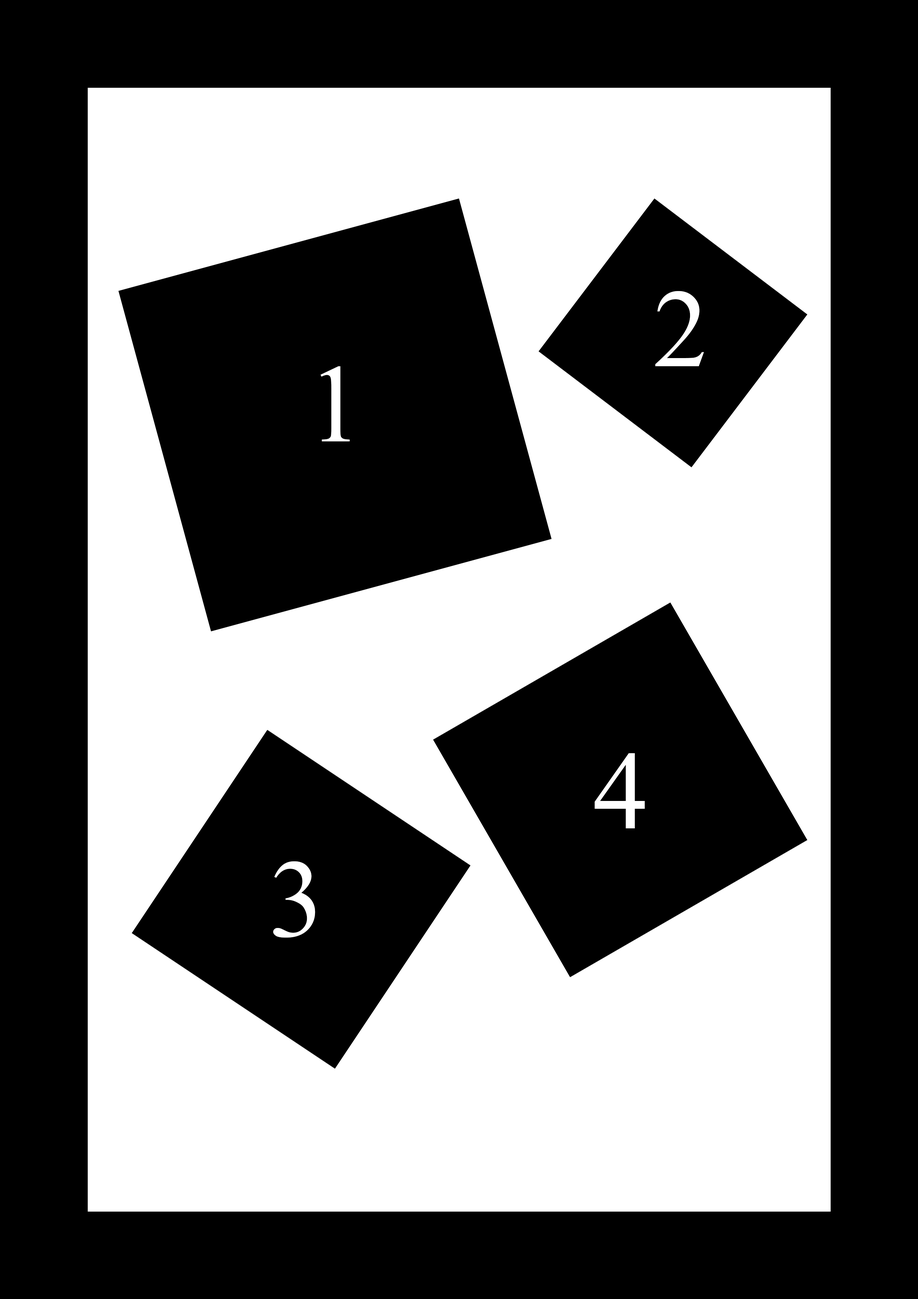
<style>
.page{position:relative;width:918px;height:1299px;background:#000000}
.page>*{position:absolute;margin:0}
.t1{font:111.1px "TimesNewRomanPSMT";color:#ffffff}
</style>
<div class="page">
<p class="t1" style="left:655px;top:291px;width:49px;height:75px">2</p>
<p class="t1" style="left:321px;top:366px;width:29px;height:75px">1</p>
<p class="t1" style="left:595px;top:753px;width:50px;height:75px">4</p>
<p class="t1" style="left:273px;top:861px;width:42px;height:76px">3</p>
</div>
